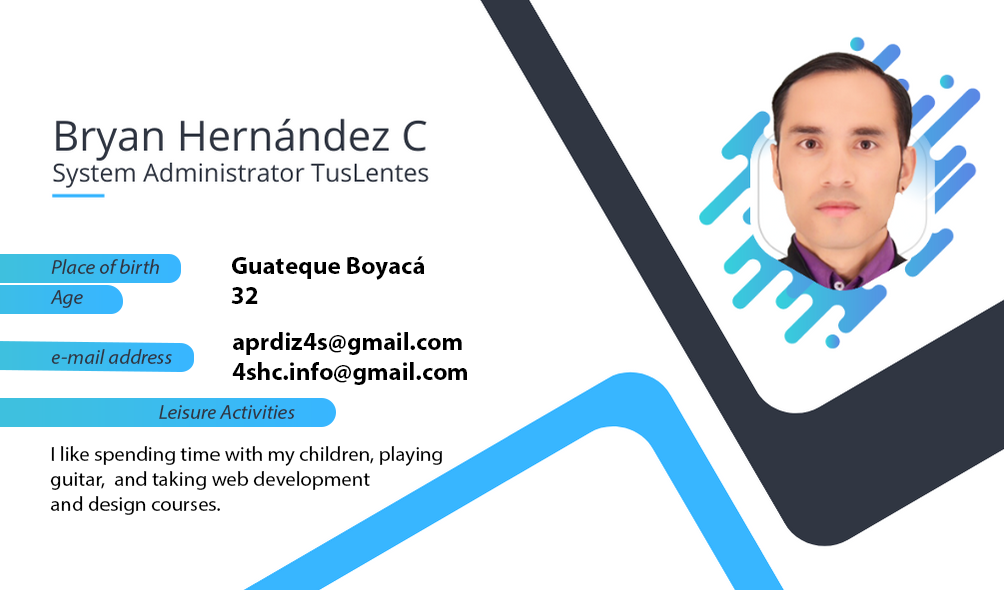
<style>
.page{position:relative;width:1004px;height:590px;background:#ffffff}
.page>*{position:absolute;margin:0}
.t1{font:20.8px/25px "MyriadPro-It";color:#303642}
.t2{font:25px "MyriadPro-Regular";color:#000000}
.t3{font:20.8px "MyriadPro-It";color:#303642}
.t4{font:25px "MyriadPro-Bold";color:#000000}
.t5{font:20.8px/25px "MyriadPro-Regular";color:#000000}
</style>
<div class="page">
<p class="t1" style="left:50px;top:256px;width:375px;height:163px"><span class="t2"><br></span><span class="t3">Place of birth   </span><span class="t4">Guateque Boyacá<br></span><span class="t3">Age       </span><span class="t4">32<br><br></span><span class="t3">e-mail address    <br><br></span>   Leisure Activities</p>
<p class="t4" style="left:232px;top:332px;width:235px;height:53px">aprdiz4s@gmail.com <br>4shc.info@gmail.com</p>
<p class="t5" style="left:50px;top:446px;width:392px;height:69px">I like spending time with my children, playing guitar,  and taking web development    and design courses.</p>
</div>
